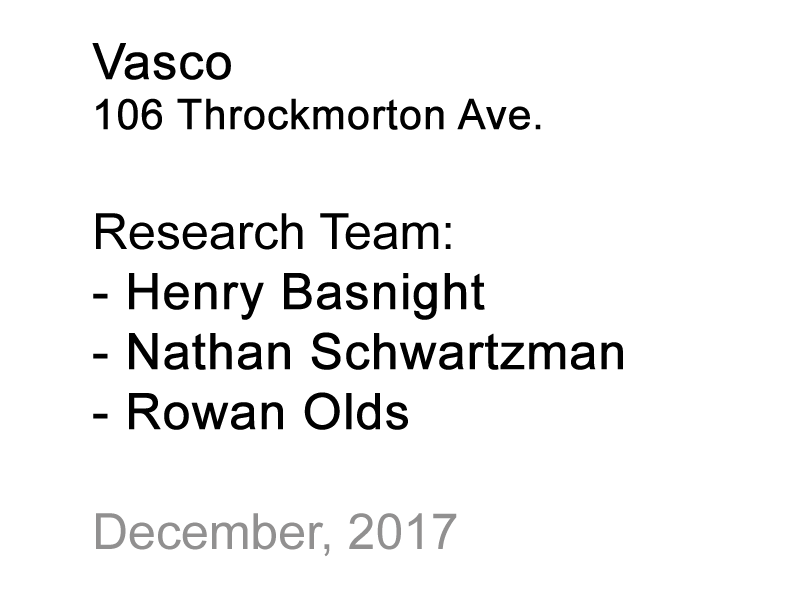
<style>
.page{position:relative;width:800px;height:600px;background:#ffffff}
.page>*{position:absolute;margin:0}
.t1{font:50px "ArialMT";color:#000000;font-weight:bold}
.t2{font:41.7px "ArialMT";color:#000000;font-weight:bold}
.t3{font:50px "ArialMT";color:#000000}
.t4{font:50px "ArialMT";color:#919090}
</style>
<div class="page">
<p class="t1" style="left:92px;top:43px;width:531px;height:514px">Vasco<br><span class="t2">106 Throckmorton Ave.<br></span><span class="t3"><br>Research Team:<br></span>- Henry Basnight<br>- Nathan Schwartzman<br>- Rowan Olds<br><br><span class="t4">December, 2017</span></p>
</div>
